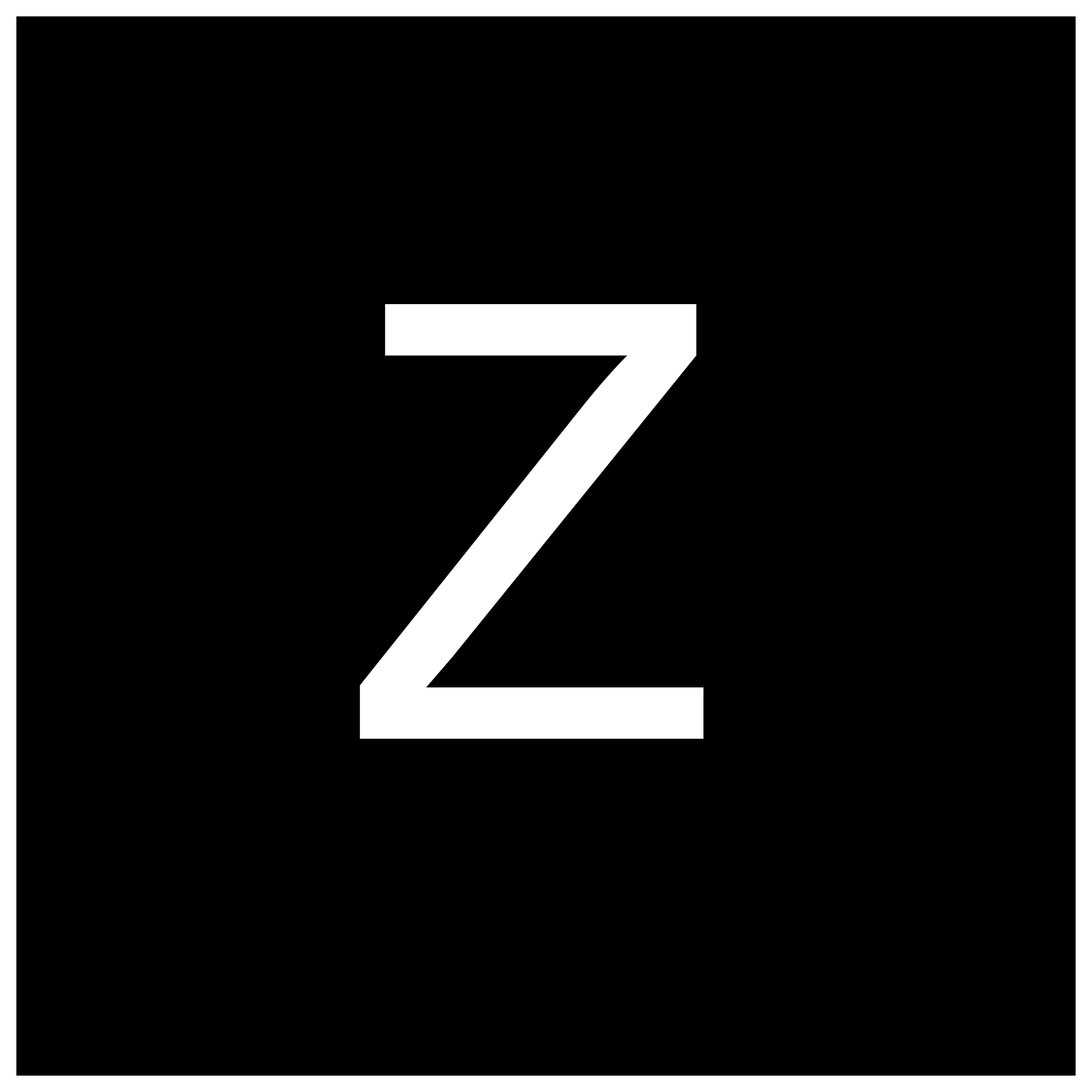
<style>
.page{position:relative;width:1092px;height:1092px;background:#000000}
.page>*{position:absolute;margin:0}
.t1{font:606.7px "ArialMT";color:#ffffff}
</style>
<div class="page">
<p class="t1" style="left:360px;top:304px;width:344px;height:435px">Z</p>
</div>
